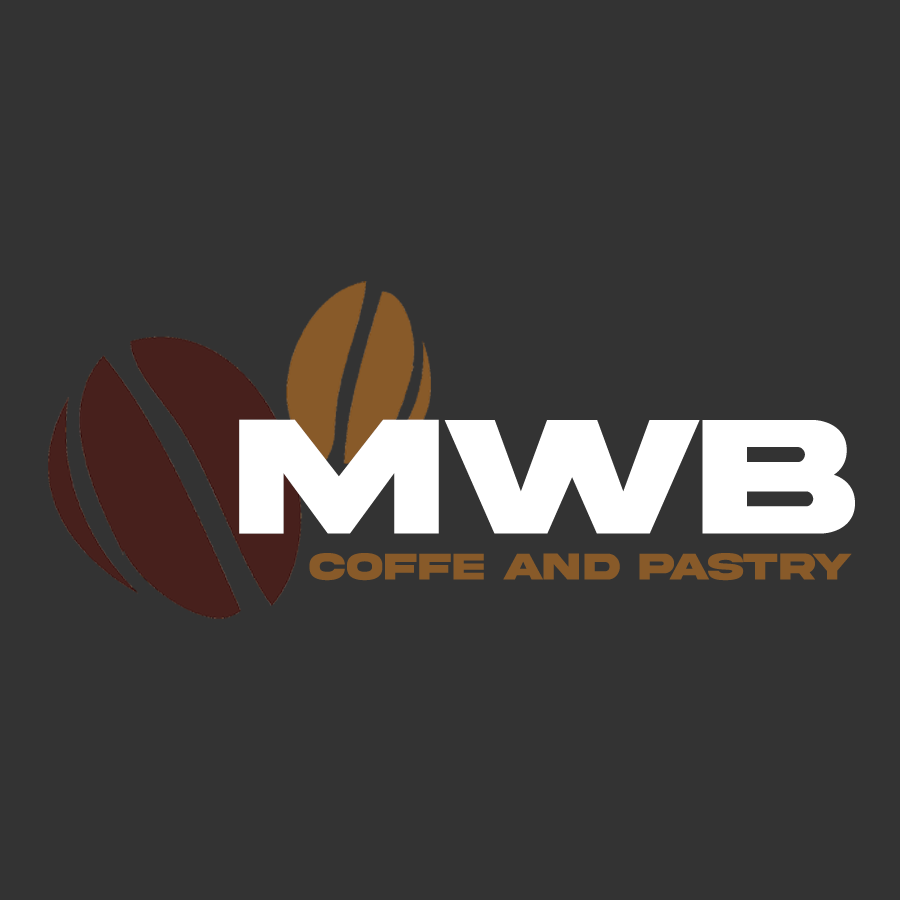
<style>
.page{position:relative;width:900px;height:900px;background:#333333}
.page>*{position:absolute;margin:0}
.t1{font:172.8px "AkiraExpanded-SuperBold";color:#ffffff}
.t2{font:39.1px "AkiraExpanded-SuperBold";color:#885a29}
</style>
<div class="page">
<p class="t1" style="left:239px;top:419px;width:616px;height:115px">mwb</p>
<p class="t2" style="left:309px;top:553px;width:543px;height:28px">coffe and pastry</p>
</div>
